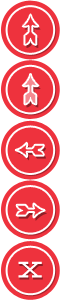
<style>
.page{position:relative;width:60px;height:300px;background:#ee323d}
.page>*{position:absolute;margin:0}
.t1{font:21.4px "DemingEP";color:#ffffff;scale:0.87 1}
</style>
<div class="page">
<p class="t1" style="left:18px;top:261px;width:24px;height:17px">X</p>
</div>
